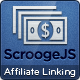
<style>
.page{position:relative;width:80px;height:80px}
.page>*{position:absolute;margin:0}
.t1{font:14px "Gotham-Medium";letter-spacing:-0.025em;color:#000025}
.t2{font:10px "Bryant-Regular";color:#ffffff}
</style>
<div class="page">
<p class="t1" style="left:4px;top:49px;width:72px;height:13px">ScroogeJS</p>
<p class="t2" style="left:4px;top:68px;width:72px;height:9px">Affiliate Linking</p>
</div>
